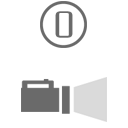
<style>
.page{position:relative;width:128px;height:128px;background:#ffffff}
.page>*{position:absolute;margin:0}
.t1{font:30px "TVpl";letter-spacing:0.05em;color:#6a6a6a}
</style>
<div class="page">
<p class="t1" style="left:55px;top:11px;width:18px;height:27px">O</p>
</div>
